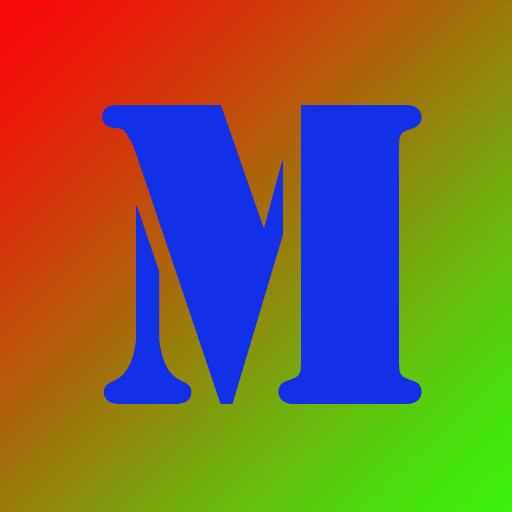
<style>
.page{position:relative;width:512px;height:512px;background:#1230e7}
.page>*{position:absolute;margin:0}
.t1{font:400px "StencilStd";color:#1230e7}
</style>
<div class="page">
<p class="t1" style="left:102px;top:105px;width:320px;height:299px">M</p>
</div>
